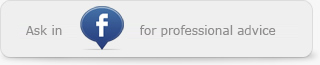
<style>
.page{position:relative;width:320px;height:65px;background:#efefef}
.page>*{position:absolute;margin:0}
.t1{font:12px "Verdana";color:#8e8d8d}
</style>
<div class="page">
<p class="t1" style="left:26px;top:25px;width:36px;height:10px">Ask in</p>
<p class="t1" style="left:140px;top:25px;width:136px;height:12px">for professional advice</p>
</div>
